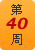
<style>
.page{position:relative;width:35px;height:50px}
.page>*{position:absolute;margin:0}
.t1{font:12px/40px "SimSun";color:#333333}
.t2{font:16px "019-CAI978";color:#b90707}
</style>
<div class="page">
<p class="t1" style="left:11px;top:4px;width:11px;height:41px">第   周</p>
<p class="t2" style="left:6px;top:17px;width:22px;height:13px">40</p>
</div>
